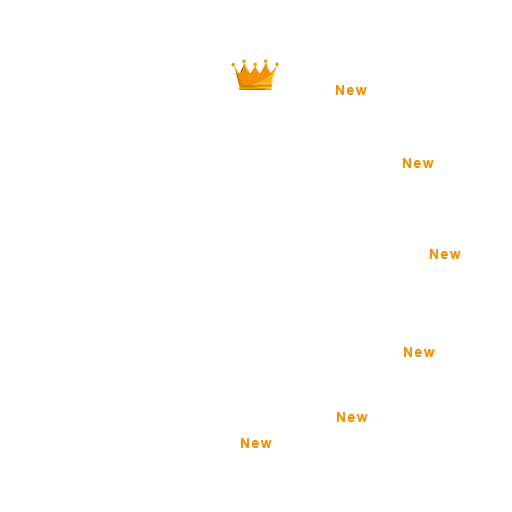
<style>
.page{position:relative;width:512px;height:512px;background:#ffffff}
.page>*{position:absolute;margin:0}
.t1{font:14px "Arial-BoldMT";letter-spacing:0.1em;color:#f09109}
</style>
<div class="page">
<p class="t1" style="left:335px;top:85px;width:32px;height:10px">New</p>
<p class="t1" style="left:402px;top:158px;width:32px;height:10px">New</p>
<p class="t1" style="left:429px;top:249px;width:32px;height:10px">New</p>
<p class="t1" style="left:403px;top:347px;width:32px;height:10px">New</p>
<p class="t1" style="left:336px;top:412px;width:32px;height:10px">New</p>
<p class="t1" style="left:240px;top:438px;width:32px;height:10px">New</p>
</div>
